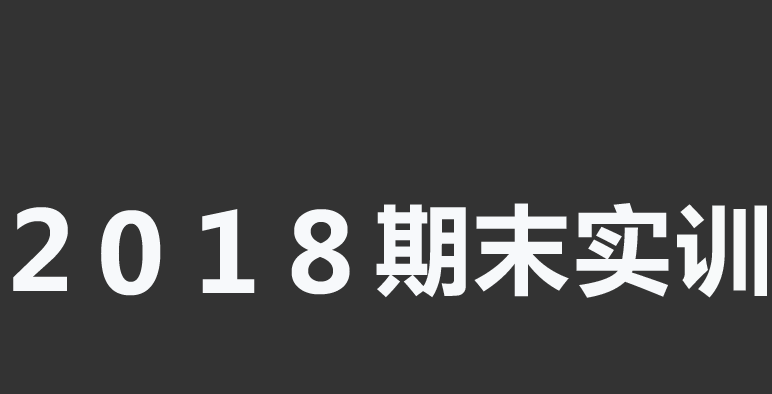
<style>
.page{position:relative;width:772px;height:394px;background:#333333}
.page>*{position:absolute;margin:0}
.t1{font:109px "MicrosoftYaHei-Bold";color:#f7f9fb}
.t2{font:97px "MicrosoftYaHei-Bold";color:#f7f9fb}
.t3{font:97px "MicrosoftYaHei-Bold";color:#f8fafa}
</style>
<div class="page">
<p class="t1" style="left:13px;top:207px;width:55px;height:84px">2</p>
<p class="t1" style="left:202px;top:209px;width:53px;height:84px">1</p>
<p class="t1" style="left:291px;top:209px;width:59px;height:86px">8</p>
<p class="t2" style="left:376px;top:204px;width:90px;height:94px">期</p>
<p class="t2" style="left:474px;top:203px;width:95px;height:94px">末</p>
<p class="t2" style="left:576px;top:203px;width:93px;height:95px">实</p>
<p class="t3" style="left:677px;top:204px;width:90px;height:94px">训</p>
<p class="t1" style="left:101px;top:210px;width:60px;height:86px">0</p>
</div>
